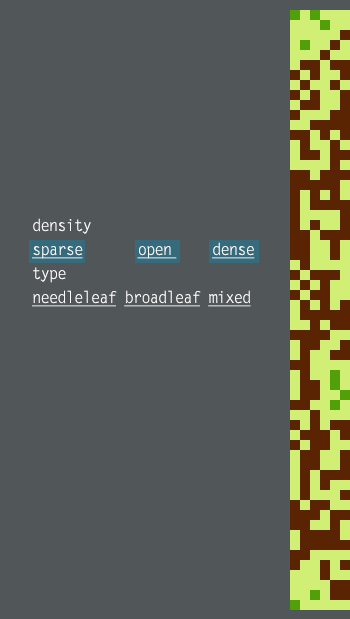
<style>
.page{position:relative;width:350px;height:619px;background:#515658}
.page>*{position:absolute;margin:0}
.t1{font:16px "LetterGothicStd";letter-spacing:-0.075em;color:#ffffff;text-decoration:underline}
.t2{font:16px "LetterGothicStd";letter-spacing:-0.075em;color:#ffffff}
</style>
<div class="page">
<p class="t1" style="left:32px;top:218px;width:223px;height:89px"><span class="t2">density<br></span>sparse     open  dense<br><span class="t2">type<br></span>needleleaf broadleaf mixed<span class="t2"> <br><br> broadleaf</span></p>
</div>
